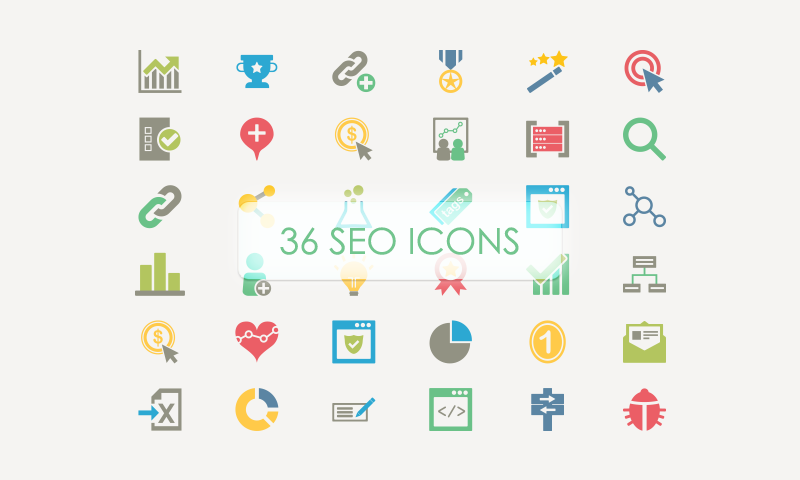
<style>
.page{position:relative;width:800px;height:480px;background:#f5f4f2}
.page>*{position:absolute;margin:0}
.t1{font:36px "CenturyGothic";color:#72c58e}
</style>
<div class="page">
<p class="t1" style="left:280px;top:227px;width:239px;height:28px">36 SEO ICONS</p>
</div>
